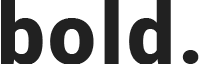
<style>
.page{position:relative;width:200px;height:64px;background:#ffffff}
.page>*{position:absolute;margin:0}
.t1{font:85.3px "Roboto-Black";letter-spacing:0.04em;color:#212121}
</style>
<div class="page">
<p class="t1" style="left:1px;top:0px;width:198px;height:65px">bold.</p>
</div>
